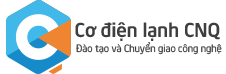
<style>
.page{position:relative;width:226px;height:74px;background:#ffffff}
.page>*{position:absolute;margin:0}
.t1{font:19px "UTMNeoSansIntelBold";color:#3e3e3e}
.t2{font:10px "UTM-Neo-Sans-Intel";color:#3e3e3e}
</style>
<div class="page">
<p class="t1" style="left:75px;top:22px;width:145px;height:19px">Cơ điện lạnh CNQ</p>
<p class="t2" style="left:76px;top:42px;width:146px;height:13px">Đào tạo và Chuyển giao công nghệ</p>
</div>
